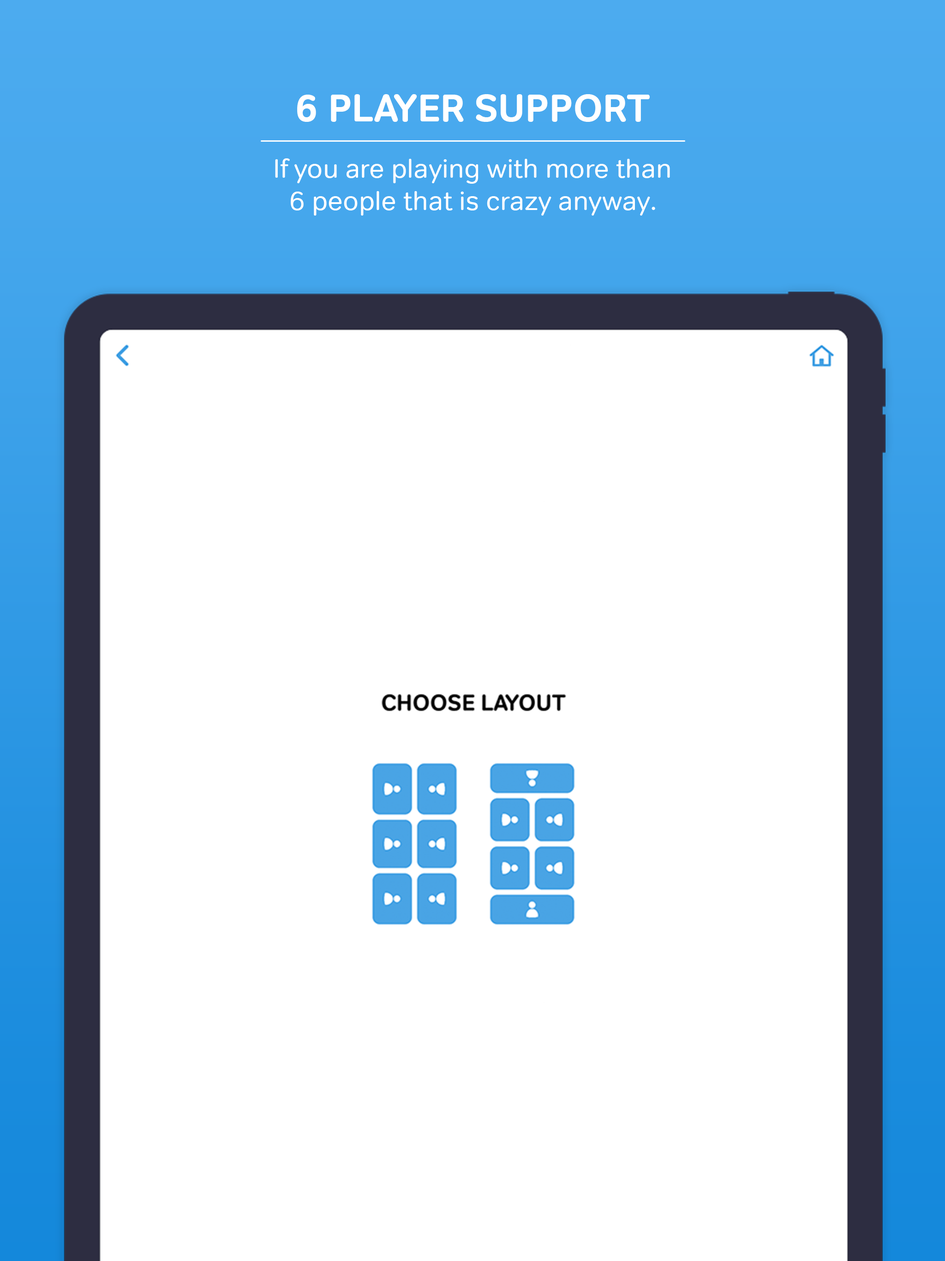
<style>
.page{position:relative;width:945px;height:1261px;background:#ffffff}
.page>*{position:absolute;margin:0}
.t1{font:38.5px "Tondo-Bold";color:#ffffff}
.t2{font:26.9px "Tondo-Regular";color:#ffffff}
</style>
<div class="page">
<p class="t1" style="left:297px;top:94px;width:353px;height:28px">6 PLAYER SUPPORT</p>
<p class="t2" style="left:275px;top:158px;width:395px;height:58px;text-align:center">If you are playing with more than<br>6 people that is crazy anyway.</p>
</div>
